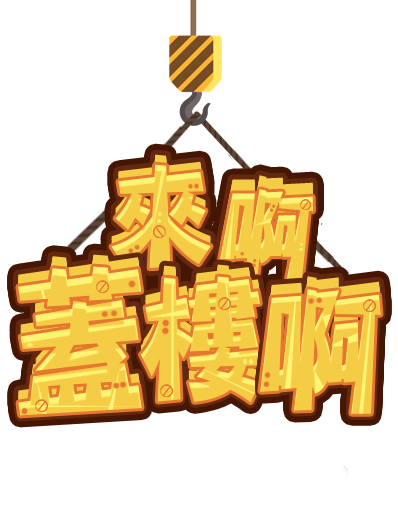
<style>
.page{position:relative;width:398px;height:520px;background:#ffffff}
.page>*{position:absolute;margin:0}
.t1{font:114.3px "DFPingJuStd-W7";scale:0.95 1}
.t2{font:114.3px "DFPingJuStd-W7";color:#f5cc46;scale:0.95 1}
.t3{font:97.3px "DFPingJuStd-W7";color:#f5cc46;scale:0.93 1}
.t4{font:163.5px "DFPingJuStd-W7";scale:0.85 1}
.t5{font:163.5px "DFPingJuStd-W7";color:#f5cc46;scale:0.85 1}
.t6{font:137.9px "DFPingJuStd-W7";color:#f5cc46;scale:0.95 1}
.t7{font:138.5px "DFPingJuStd-W7";color:#f5cc46;scale:0.88 1}
</style>
<div class="page">
<p class="t1" style="left:111px;top:154px;width:100px;height:105px">來</p>
<p class="t1" style="left:111px;top:155px;width:100px;height:105px">來</p>
<p class="t1" style="left:111px;top:156px;width:100px;height:105px">來</p>
<p class="t1" style="left:111px;top:157px;width:100px;height:105px">來</p>
<p class="t1" style="left:111px;top:157px;width:100px;height:105px">來</p>
<p class="t1" style="left:111px;top:158px;width:100px;height:105px">來</p>
<p class="t1" style="left:111px;top:159px;width:100px;height:105px">來</p>
<p class="t1" style="left:111px;top:160px;width:100px;height:105px">來</p>
<p class="t2" style="left:111px;top:161px;width:100px;height:105px">來</p>
<p class="t2" style="left:111px;top:162px;width:100px;height:105px">來</p>
<p class="t2" style="left:111px;top:163px;width:100px;height:105px">來</p>
<p class="t2" style="left:111px;top:164px;width:100px;height:105px">來</p>
<p class="t2" style="left:111px;top:165px;width:100px;height:105px">來</p>
<p class="t2" style="left:111px;top:166px;width:100px;height:105px">來</p>
<p class="t2" style="left:111px;top:167px;width:100px;height:105px">來</p>
<p class="t2" style="left:111px;top:164px;width:100px;height:105px">來</p>
<p class="t3" style="left:220px;top:175px;width:93px;height:91px;rotate:8deg">啊</p>
<p class="t3" style="left:220px;top:176px;width:93px;height:91px;rotate:8deg">啊</p>
<p class="t3" style="left:220px;top:177px;width:93px;height:91px;rotate:8deg">啊</p>
<p class="t3" style="left:220px;top:178px;width:93px;height:91px;rotate:8deg">啊</p>
<p class="t3" style="left:220px;top:179px;width:93px;height:91px;rotate:8deg">啊</p>
<p class="t3" style="left:220px;top:180px;width:93px;height:91px;rotate:8deg">啊</p>
<p class="t3" style="left:220px;top:181px;width:93px;height:91px;rotate:8deg">啊</p>
<p class="t3" style="left:220px;top:182px;width:93px;height:91px;rotate:8deg">啊</p>
<p class="t3" style="left:220px;top:183px;width:93px;height:91px;rotate:8deg">啊</p>
<p class="t3" style="left:220px;top:184px;width:93px;height:91px;rotate:8deg">啊</p>
<p class="t3" style="left:220px;top:185px;width:93px;height:91px;rotate:8deg">啊</p>
<p class="t3" style="left:220px;top:185px;width:93px;height:91px;rotate:8deg">啊</p>
<p class="t3" style="left:220px;top:186px;width:93px;height:91px;rotate:8deg">啊</p>
<p class="t3" style="left:220px;top:187px;width:93px;height:91px;rotate:8deg">啊</p>
<p class="t3" style="left:220px;top:188px;width:93px;height:91px;rotate:8deg">啊</p>
<p class="t3" style="left:220px;top:189px;width:93px;height:91px;rotate:8deg">啊</p>
<p class="t4" style="left:18px;top:254px;width:124px;height:150px">蓋</p>
<p class="t4" style="left:18px;top:255px;width:124px;height:150px">蓋</p>
<p class="t4" style="left:18px;top:256px;width:124px;height:150px">蓋</p>
<p class="t4" style="left:18px;top:257px;width:124px;height:150px">蓋</p>
<p class="t4" style="left:18px;top:258px;width:124px;height:150px">蓋</p>
<p class="t4" style="left:18px;top:259px;width:124px;height:150px">蓋</p>
<p class="t4" style="left:18px;top:259px;width:124px;height:150px">蓋</p>
<p class="t4" style="left:18px;top:260px;width:124px;height:150px">蓋</p>
<p class="t4" style="left:18px;top:261px;width:124px;height:150px">蓋</p>
<p class="t4" style="left:18px;top:262px;width:124px;height:150px">蓋</p>
<p class="t4" style="left:18px;top:263px;width:124px;height:150px">蓋</p>
<p class="t5" style="left:18px;top:264px;width:124px;height:150px">蓋</p>
<p class="t5" style="left:18px;top:265px;width:124px;height:150px">蓋</p>
<p class="t5" style="left:18px;top:266px;width:124px;height:150px">蓋</p>
<p class="t5" style="left:18px;top:267px;width:124px;height:150px">蓋</p>
<p class="t5" style="left:18px;top:266px;width:124px;height:150px">蓋</p>
<p class="t6" style="left:140px;top:264px;width:121px;height:127px">樓</p>
<p class="t6" style="left:140px;top:265px;width:121px;height:127px">樓</p>
<p class="t6" style="left:140px;top:266px;width:121px;height:127px">樓</p>
<p class="t6" style="left:140px;top:267px;width:121px;height:127px">樓</p>
<p class="t6" style="left:140px;top:268px;width:121px;height:127px">樓</p>
<p class="t6" style="left:140px;top:269px;width:121px;height:127px">樓</p>
<p class="t6" style="left:140px;top:269px;width:121px;height:127px">樓</p>
<p class="t6" style="left:140px;top:270px;width:121px;height:127px">樓</p>
<p class="t6" style="left:140px;top:271px;width:121px;height:127px">樓</p>
<p class="t6" style="left:140px;top:272px;width:121px;height:127px">樓</p>
<p class="t6" style="left:140px;top:273px;width:121px;height:127px">樓</p>
<p class="t6" style="left:140px;top:274px;width:121px;height:127px">樓</p>
<p class="t6" style="left:140px;top:275px;width:121px;height:127px">樓</p>
<p class="t6" style="left:140px;top:276px;width:121px;height:127px">樓</p>
<p class="t6" style="left:140px;top:277px;width:121px;height:127px">樓</p>
<p class="t6" style="left:140px;top:276px;width:121px;height:127px">樓</p>
<p class="t7" style="left:260px;top:276px;width:121px;height:125px;rotate:4deg">啊</p>
<p class="t7" style="left:260px;top:277px;width:121px;height:125px;rotate:4deg">啊</p>
<p class="t7" style="left:260px;top:278px;width:121px;height:125px;rotate:4deg">啊</p>
<p class="t7" style="left:260px;top:279px;width:121px;height:125px;rotate:4deg">啊</p>
<p class="t7" style="left:260px;top:280px;width:121px;height:125px;rotate:4deg">啊</p>
<p class="t7" style="left:260px;top:281px;width:121px;height:125px;rotate:4deg">啊</p>
<p class="t7" style="left:260px;top:282px;width:121px;height:125px;rotate:4deg">啊</p>
<p class="t7" style="left:260px;top:283px;width:121px;height:125px;rotate:4deg">啊</p>
<p class="t7" style="left:260px;top:284px;width:121px;height:125px;rotate:4deg">啊</p>
<p class="t7" style="left:260px;top:285px;width:121px;height:125px;rotate:4deg">啊</p>
<p class="t7" style="left:260px;top:286px;width:121px;height:125px;rotate:4deg">啊</p>
<p class="t7" style="left:260px;top:287px;width:121px;height:125px;rotate:4deg">啊</p>
<p class="t7" style="left:260px;top:288px;width:121px;height:125px;rotate:4deg">啊</p>
<p class="t7" style="left:260px;top:289px;width:121px;height:125px;rotate:4deg">啊</p>
<p class="t7" style="left:260px;top:290px;width:121px;height:125px;rotate:4deg">啊</p>
<p class="t7" style="left:260px;top:289px;width:121px;height:125px;rotate:4deg">啊</p>
</div>
